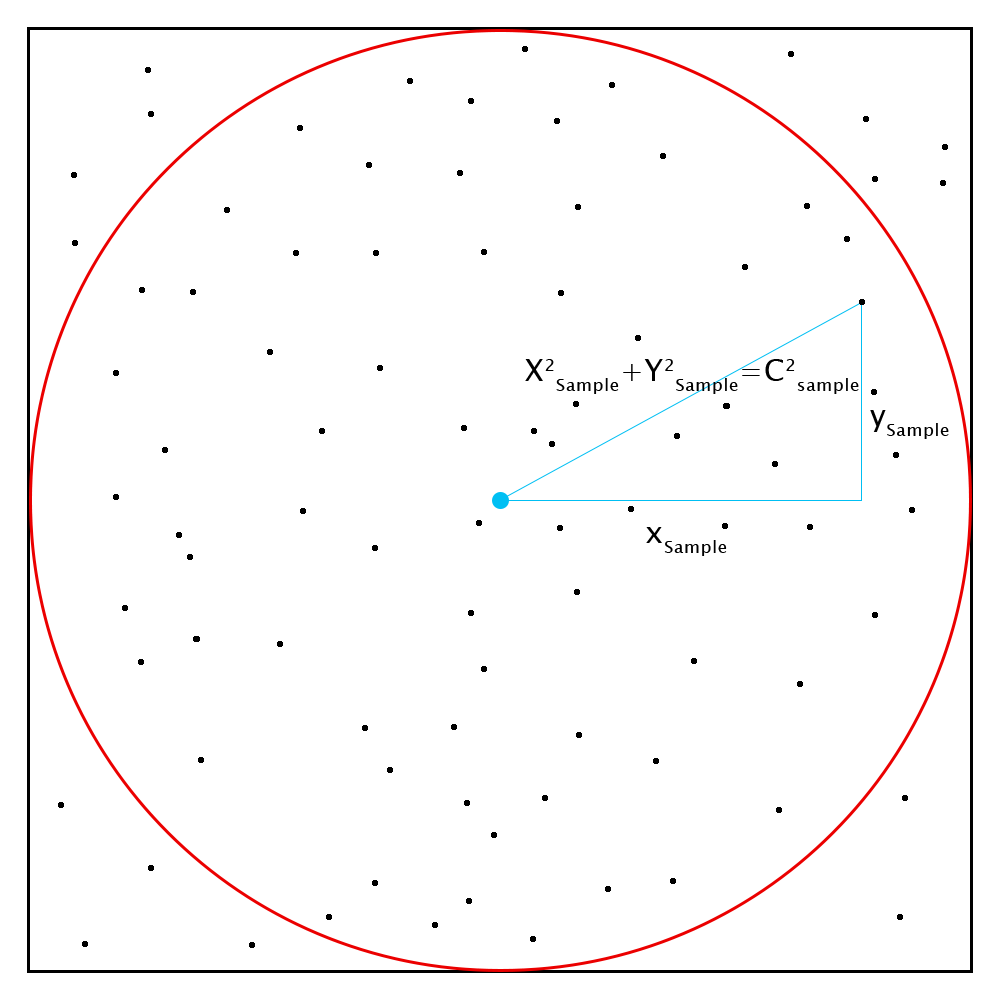
<style>
.page{position:relative;width:1000px;height:1000px;background:#ffffff}
.page>*{position:absolute;margin:0}
.t1{font:30px "LucidaSansUnicode";letter-spacing:0.025em;color:#000000}
</style>
<div class="page">
<p class="t1" style="left:525px;top:359px;width:334px;height:35px">X2Sample+Y2Sample=C2sample</p>
<p class="t1" style="left:870px;top:410px;width:79px;height:29px">ySample</p>
<p class="t1" style="left:646px;top:527px;width:81px;height:29px">xSample</p>
</div>
